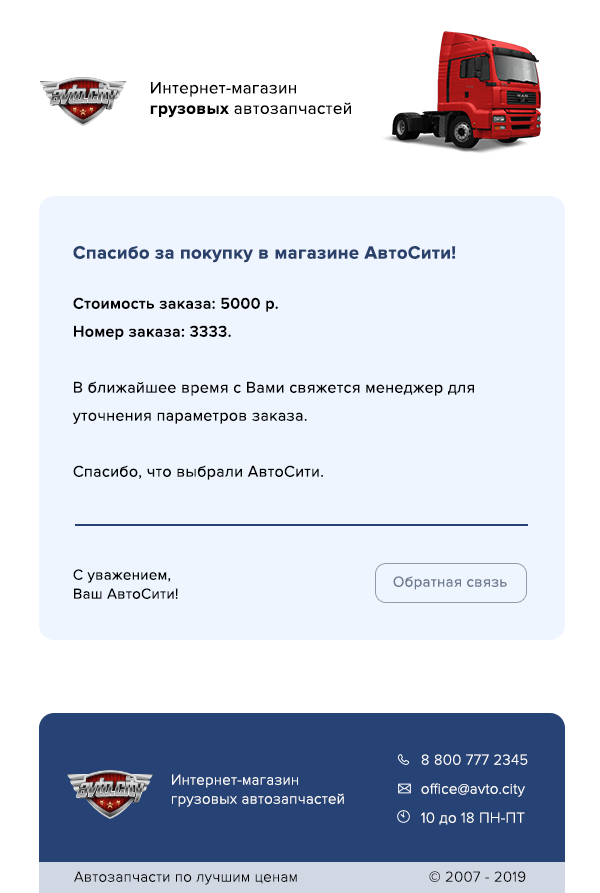
<style>
.page{position:relative;width:600px;height:893px;background:#eef5ff}
.page>*{position:absolute;margin:0}
.t1{font:17px "ProximaNova-Regular";letter-spacing:0.02em;color:#000000}
.t2{font:17px "ProximaNova-Bold";letter-spacing:0.02em;color:#000000}
.t3{font:18.4px "ProximaNova-Bold";letter-spacing:0.02em;color:#2a416c}
.t4{font:16px/28px "ProximaNova-Regular";letter-spacing:0.02em;color:#000000}
.t5{font:16px/28px "ProximaNova-Semibold";letter-spacing:0.02em;color:#000000}
.t6{font:15px/19px "ProximaNova-Regular";letter-spacing:0.02em;color:#000000}
.t7{font:15px "ProximaNova-Regular";letter-spacing:0.02em;color:#6d798d}
.t8{font:15px/29px "ProximaNova-Light";letter-spacing:0.02em;color:#ffffff}
.t9{font:15px/19px "ProximaNova-Light";letter-spacing:0.02em;color:#ffffff}
.t10{font:15px "ProximaNova-Light";letter-spacing:0.02em;color:#000000}
</style>
<div class="page">
<p class="t1" style="left:150px;top:82px;width:201px;height:36px">Интернет-магазин<br><span class="t2">грузовых </span>автозапчастей</p>
<p class="t3" style="left:73px;top:246px;width:383px;height:17px">Спасибо за покупку в магазине АвтоСити!</p>
<p class="t4" style="left:72px;top:297px;width:402px;height:183px"><span class="t5">Стоимость заказа: 5000 р.<br>Номер заказа: 3333.<br></span><br>В ближайшее время с Вами свяжется менеджер для уточнения параметров заказа.<br><br>Спасибо, что выбрали АвтоСити.</p>
<p class="t6" style="left:73px;top:569px;width:105px;height:30px">С уважением,<br>Ваш АвтоСити!</p>
<p class="t7" style="left:393px;top:576px;width:114px;height:14px">Обратная связь</p>
<p class="t8" style="left:421px;top:754px;width:107px;height:71px">8 800 777 2345<br>office@avto.city<br>10 до 18 ПН-ПТ</p>
<p class="t9" style="left:172px;top:774px;width:172px;height:33px">Интернет-магазин<br>грузовых автозапчастей</p>
<p class="t10" style="left:74px;top:871px;width:223px;height:14px">Автозапчасти по лучшим ценам</p>
<p class="t10" style="left:429px;top:871px;width:97px;height:11px">© 2007 - 2019</p>
</div>
